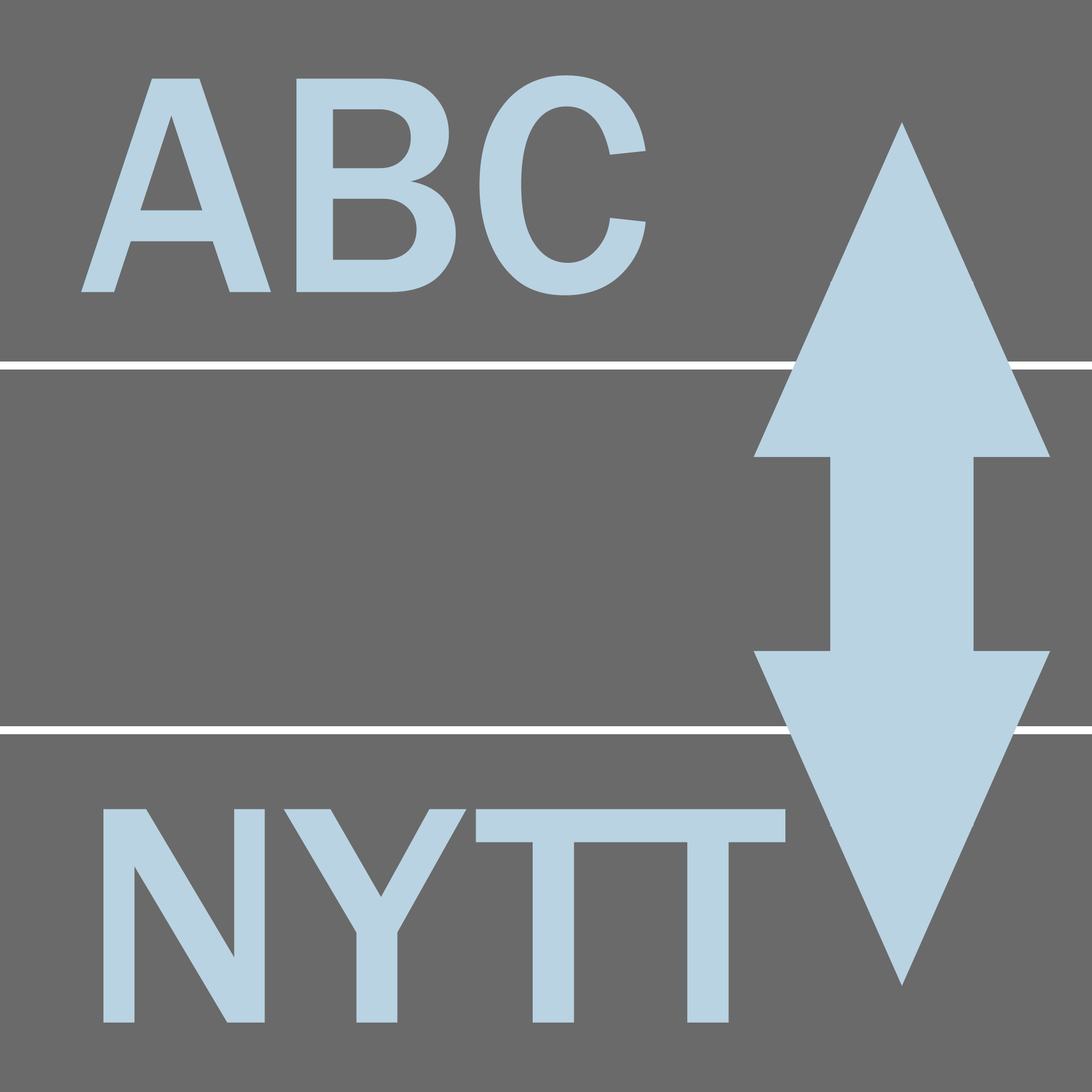
<style>
.page{position:relative;width:1092px;height:1092px;background:#6a6a6a}
.page>*{position:absolute;margin:0}
.t1{font:319.9px "FranklinGothic-Medium";color:#b9d3e2}
</style>
<div class="page">
<p class="t1" style="left:81px;top:75px;width:565px;height:220px">ABC</p>
<p class="t1" style="left:103px;top:809px;width:682px;height:214px">NYTT</p>
</div>
